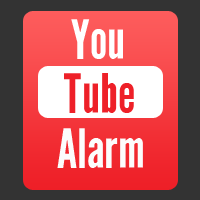
<style>
.page{position:relative;width:200px;height:200px;background:#333333}
.page>*{position:absolute;margin:0}
.t1{font:54.1px "LeagueGothic-Regular";color:#ffffff}
.t2{font:54.1px "LeagueGothic-Regular";color:#ee2028}
.t3{font:54.1px "LeagueGothic-Regular";color:#fcfcfc}
</style>
<div class="page">
<p class="t1" style="left:71px;top:19px;width:52px;height:40px">You</p>
<p class="t2" style="left:64px;top:73px;width:70px;height:40px">Tube</p>
<p class="t3" style="left:57px;top:128px;width:86px;height:40px">Alarm</p>
</div>
